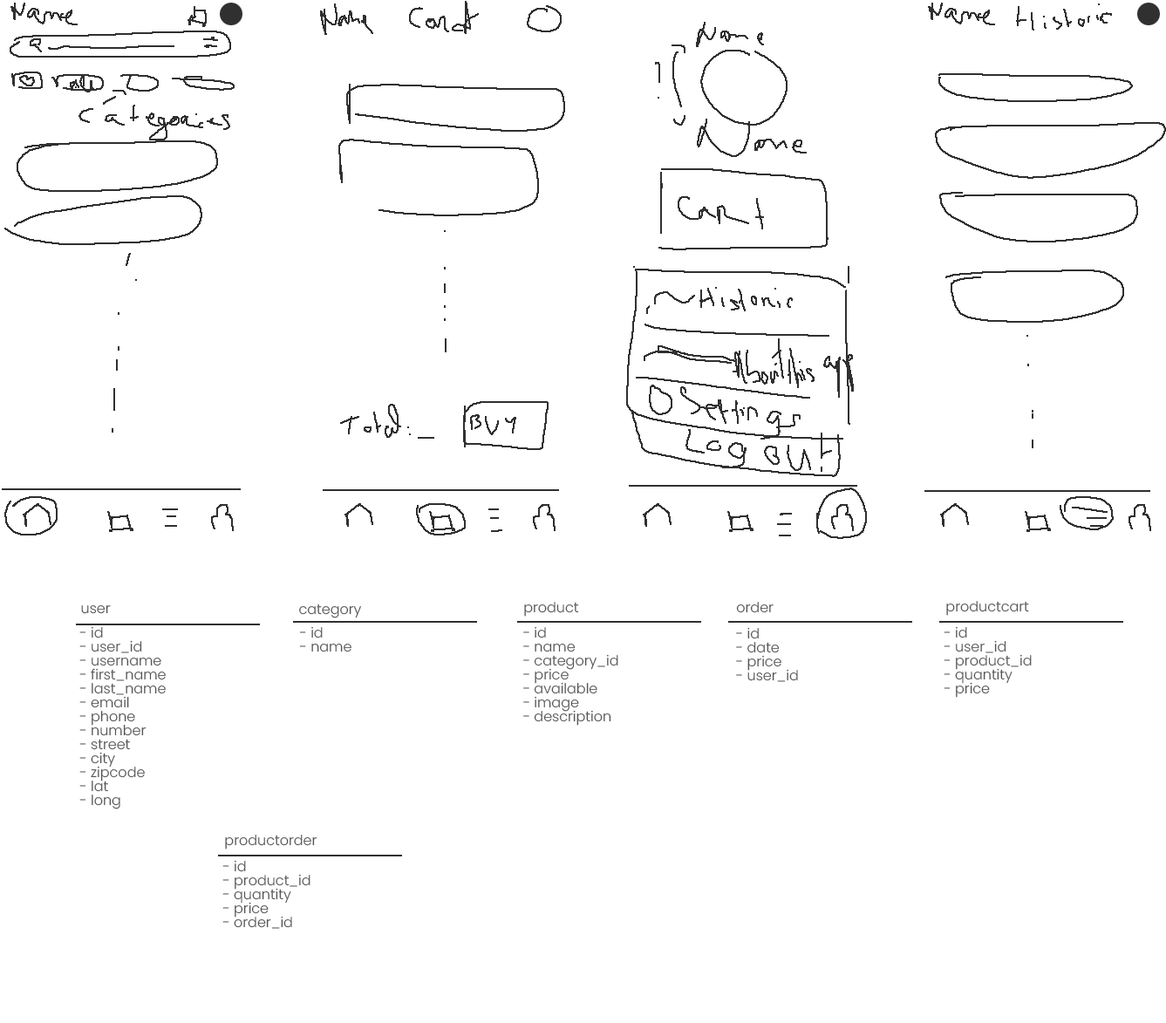
<style>
.page{position:relative;width:1166px;height:1023px;background:#ffffff}
.page>*{position:absolute;margin:0}
.t1{font:14px "Poppins-Light";color:#555555}
.t2{font:14px/14px "Poppins-Light";color:#555555}
</style>
<div class="page">
<p class="t1" style="left:81px;top:605px;width:30px;height:9px">user</p>
<p class="t1" style="left:299px;top:603px;width:62px;height:15px">category</p>
<p class="t1" style="left:524px;top:602px;width:55px;height:14px">product</p>
<p class="t1" style="left:736px;top:602px;width:37px;height:11px">order</p>
<p class="t1" style="left:946px;top:601px;width:83px;height:15px">productcart</p>
<p class="t2" style="left:79px;top:626px;width:87px;height:183px">- id<br>- user_id<br>- username<br>- first_name<br>- last_name<br>- email<br>- phone<br>- number<br>- street<br>- city<br>- zipcode<br>- lat<br>- long</p>
<p class="t2" style="left:299px;top:626px;width:52px;height:26px">- id<br>- name</p>
<p class="t2" style="left:523px;top:626px;width:95px;height:99px">- id<br>- name<br>- category_id<br>- price<br>- available<br>- image<br>- description</p>
<p class="t2" style="left:736px;top:627px;width:62px;height:55px">- id<br>- date<br>- price<br>- user_id</p>
<p class="t2" style="left:943px;top:626px;width:89px;height:72px">- id<br>- user_id<br>- product_id<br>- quantity<br>- price</p>
<p class="t1" style="left:225px;top:834px;width:92px;height:15px">productorder</p>
<p class="t2" style="left:222px;top:860px;width:88px;height:69px">- id<br>- product_id<br>- quantity<br>- price<br>- order_id</p>
</div>
